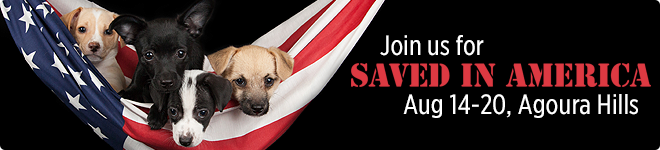
<style>
.page{position:relative;width:660px;height:150px;background:#000000}
.page>*{position:absolute;margin:0}
.t1{font:26.7px "GothamXNarrSSm-Book";color:#ffffff}
</style>
<div class="page">
<p class="t1" style="left:380px;top:35px;width:104px;height:21px">Join us for</p>
<p class="t1" style="left:403px;top:94px;width:235px;height:24px">Aug 14-20, Agoura Hills</p>
</div>
